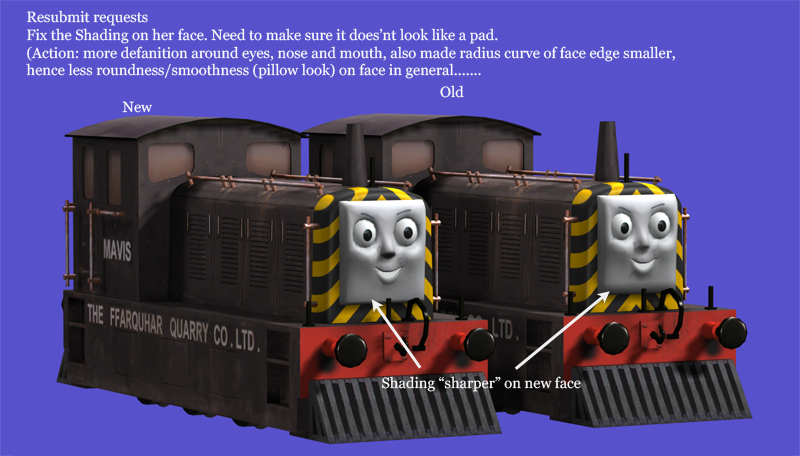
<style>
.page{position:relative;width:800px;height:456px;background:#5751cc}
.page>*{position:absolute;margin:0}
.t1{font:14.8px "Georgia";color:#fafafa}
</style>
<div class="page">
<p class="t1" style="left:26px;top:10px;width:649px;height:69px">Resubmit requests<br>Fix the Shading on her face. Need to make sure it does’nt look like a pad.<br>(Action: more defanition around eyes, nose and mouth, also made radius curve of face edge smaller,<br>hence less roundness/smoothness (pillow look) on face in general.......</p>
<p class="t1" style="left:440px;top:85px;width:24px;height:13px">Old</p>
<p class="t1" style="left:122px;top:101px;width:31px;height:12px">New</p>
<p class="t1" style="left:382px;top:376px;width:199px;height:16px">Shading “sharper” on new face</p>
</div>
